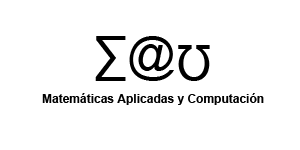
<style>
.page{position:relative;width:300px;height:150px;background:#ffffff}
.page>*{position:absolute;margin:0}
.t1{font:48px "ArialMT";color:#000000}
.t2{font:12px "Arial-BoldMT";color:#000000}
</style>
<div class="page">
<p class="t1" style="left:95px;top:36px;width:31px;height:45px">∑</p>
<p class="t1" style="left:129px;top:36px;width:45px;height:45px">@</p>
<p class="t1" style="left:178px;top:45px;width:32px;height:36px">Ʊ</p>
<p class="t2" style="left:42px;top:93px;width:222px;height:12px">Matemáticas Aplicadas y Computación</p>
</div>
